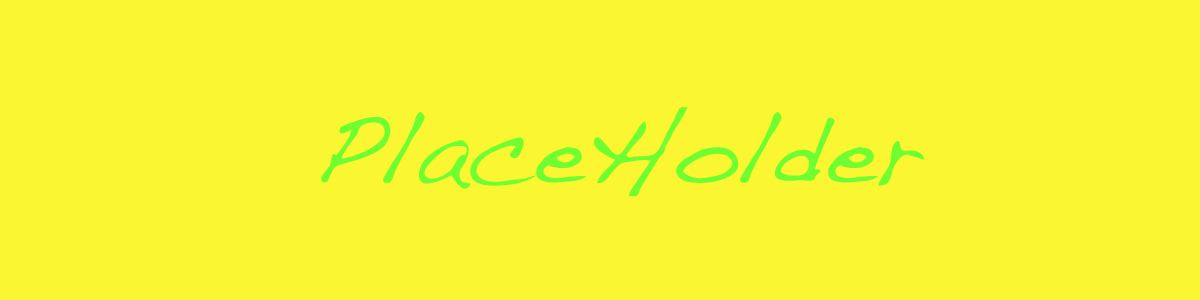
<style>
.page{position:relative;width:1200px;height:300px;background:#faf632}
.page>*{position:absolute;margin:0}
.t1{font:88px "Dakota";color:#6fff31}
</style>
<div class="page">
<p class="t1" style="left:321px;top:107px;width:604px;height:90px">PlaceHolder</p>
</div>
